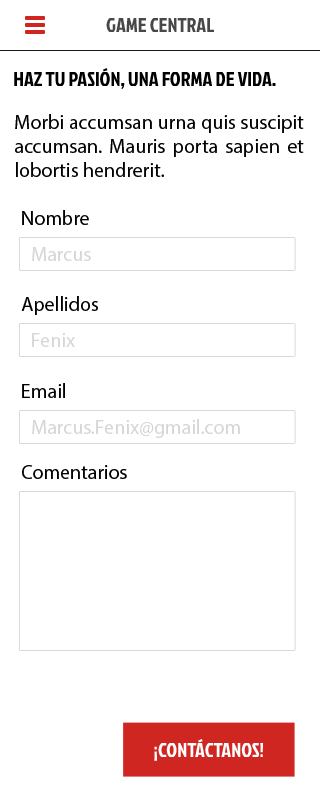
<style>
.page{position:relative;width:320px;height:809px;background:#ffffff}
.page>*{position:absolute;margin:0}
.t1{font:20px "JockeyOne-Regular";color:#494849}
.t2{font:20px "JockeyOne-Regular";color:#000000}
.t3{font:20px "MyriadPro-Regular";color:#000000}
.t4{font:20px "MyriadPro-Regular";color:#d6d6d6}
.t5{font:20px "JockeyOne-Regular";color:#ffffff}
</style>
<div class="page">
<p class="t1" style="left:106px;top:18px;width:108px;height:14px">GAME CENTRAL</p>
<p class="t2" style="left:14px;top:68px;width:262px;height:21px">HAZ TU PASIÓN, UNA FORMA DE VIDA.</p>
<p class="t3" style="left:15px;top:114px;width:289px;height:63px;text-align:justify">Morbi accumsan urna quis suscipit accumsan. Mauris porta sapien et lobortis hendrerit.</p>
<p class="t3" style="left:22px;top:210px;width:67px;height:15px">Nombre</p>
<p class="t4" style="left:32px;top:247px;width:59px;height:14px">Marcus</p>
<p class="t3" style="left:21px;top:296px;width:77px;height:19px">Apellidos</p>
<p class="t4" style="left:32px;top:333px;width:43px;height:14px">Fenix</p>
<p class="t3" style="left:22px;top:383px;width:43px;height:15px">Email</p>
<p class="t4" style="left:32px;top:419px;width:208px;height:19px">Marcus.Fenix@gmail.com</p>
<p class="t3" style="left:22px;top:465px;width:105px;height:14px">Comentarios</p>
<p class="t5" style="left:154px;top:739px;width:110px;height:22px">¡CONTÁCTANOS!</p>
</div>
